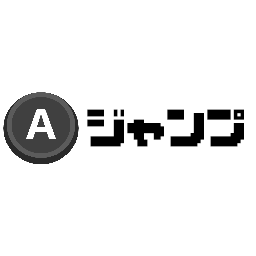
<style>
.page{position:relative;width:256px;height:256px;background:#ffffff}
.page>*{position:absolute;margin:0}
.t1{font:40px "Melonano";color:#000000}
</style>
<div class="page">
<p class="t1" style="left:87px;top:109px;width:157px;height:38px">ジャンプ</p>
</div>
